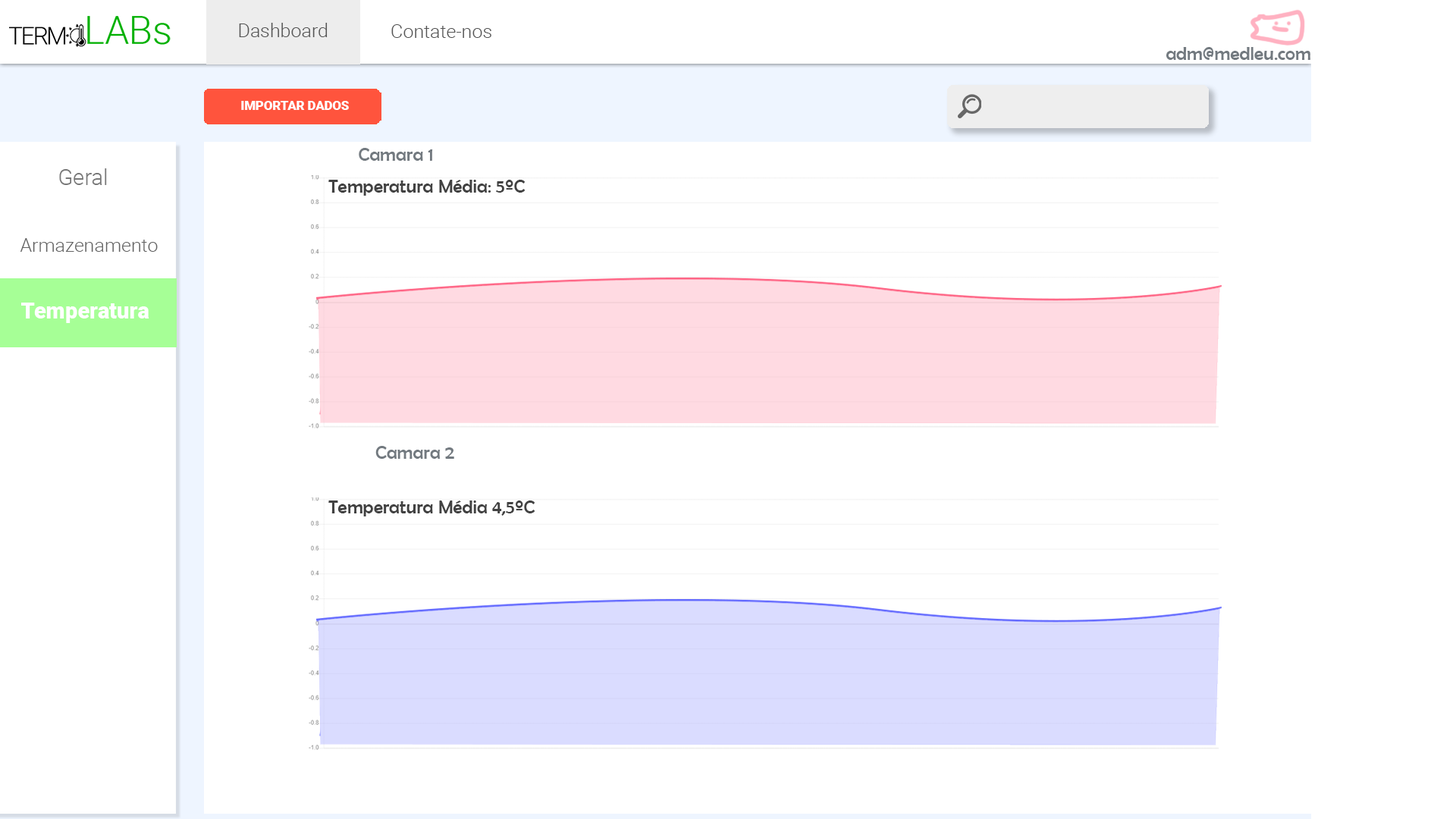
<style>
.page{position:relative;width:1456px;height:819px;background:#ffffff}
.page>*{position:absolute;margin:0}
.t1{font:19px "Roboto-Light";color:#545454}
.t2{font:19px "BerlinSansFB-Reg";color:#737a80}
.t3{font:12.6px "Roboto-Black";color:#ffffff}
.t4{font:22.1px "Roboto-Light";color:#797979}
.t5{font:19px "BerlinSansFB-Reg";color:#424242}
.t6{font:19px "Roboto-Light";color:#636363}
.t7{font:22.1px "Roboto-Black";color:#ffffff}
</style>
<div class="page">
<p class="t1" style="left:239px;top:23px;width:89px;height:14px">Dashboard</p>
<p class="t1" style="left:391px;top:24px;width:100px;height:14px">Contate-nos</p>
<p class="t2" style="left:1166px;top:47px;width:144px;height:13px">adm@medleu.com</p>
<p class="t3" style="left:241px;top:101px;width:108px;height:9px">IMPORTAR DADOS</p>
<p class="t2" style="left:359px;top:148px;width:74px;height:13px">Camara 1</p>
<p class="t4" style="left:59px;top:168px;width:48px;height:17px">Geral</p>
<p class="t5" style="left:328px;top:180px;width:198px;height:16px">Temperatura Média: 5ºC</p>
<p class="t6" style="left:20px;top:238px;width:138px;height:14px">Armazenamento</p>
<p class="t7" style="left:21px;top:303px;width:128px;height:20px">Temperatura</p>
<p class="t2" style="left:375px;top:446px;width:79px;height:13px">Camara 2</p>
<p class="t5" style="left:328px;top:500px;width:207px;height:16px">Temperatura Média 4,5ºC</p>
</div>
